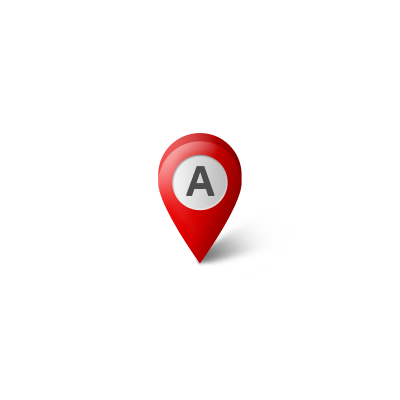
<style>
.page{position:relative;width:400px;height:400px;background:#ffffff}
.page>*{position:absolute;margin:0}
.t1{font:40px "Arial-BoldMT";color:#4c4c4c}
</style>
<div class="page">
<p class="t1" style="left:186px;top:167px;width:29px;height:29px">A</p>
</div>
